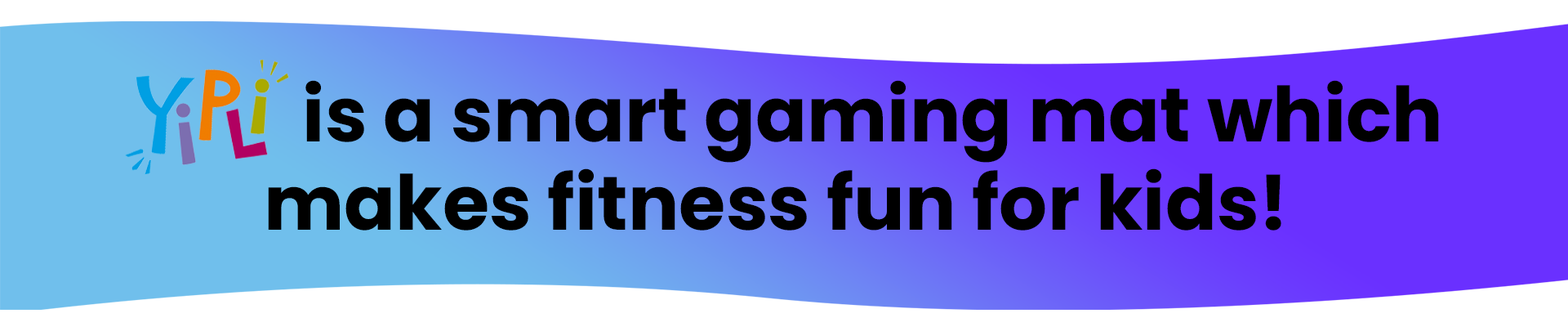
<style>
.page{position:relative;width:1568px;height:327px;background:#ffffff}
.page>*{position:absolute;margin:0}
.t1{font:75.8px/87.9px "Poppins-Bold";color:#000000}
</style>
<div class="page">
<p class="t1" style="left:268px;top:80px;width:1171px;height:150px;text-align:center">is a smart gaming mat which<br>makes fitness fun for kids!</p>
</div>
